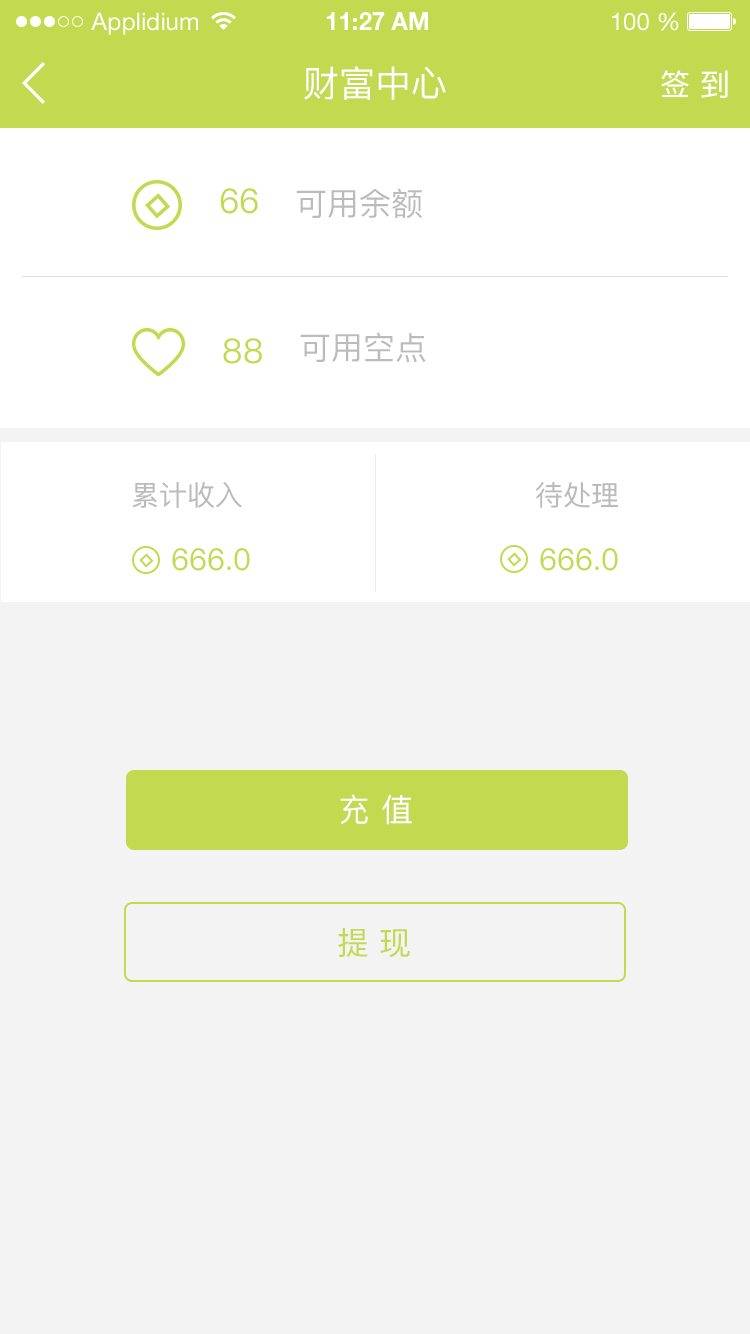
<style>
.page{position:relative;width:750px;height:1334px;background:#f3f3f3}
.page>*{position:absolute;margin:0}
.t1{font:24px "HelveticaNeueLTStd-Roman";color:#ffffff}
.t2{font:24px "HelveticaNeueLTStd-Bd";color:#ffffff}
.t3{font:36px "PingFangSC-Regular";color:#ffffff}
.t4{font:30px "PingFangSC-Regular";color:#ffffff}
.t5{font:34px "PingFangSC-Regular";color:#c3d94f}
.t6{font:32px "PingFangSC-Regular";color:#bbbbbb}
.t7{font:28px "PingFangSC-Regular";color:#bbbbbb}
.t8{font:30px "PingFangSC-Regular";color:#c3d94f}
.t9{font:32px "PingFangSC-Regular";color:#ffffff}
.t10{font:32px "PingFangSC-Regular";color:#c3d94f}
</style>
<div class="page">
<p class="t1" style="left:91px;top:12px;width:107px;height:23px">Applidium</p>
<p class="t2" style="left:326px;top:12px;width:102px;height:18px">11:27 AM</p>
<p class="t1" style="left:612px;top:12px;width:67px;height:19px">100 %</p>
<p class="t3" style="left:304px;top:66px;width:142px;height:34px">财富中心</p>
<p class="t4" style="left:661px;top:70px;width:67px;height:28px">签 到</p>
<p class="t5" style="left:220px;top:188px;width:38px;height:26px">66</p>
<p class="t6" style="left:296px;top:188px;width:126px;height:31px">可用余额</p>
<p class="t5" style="left:223px;top:338px;width:39px;height:26px">88</p>
<p class="t6" style="left:300px;top:332px;width:126px;height:31px">可用空点</p>
<p class="t7" style="left:132px;top:482px;width:110px;height:26px">累计收入</p>
<p class="t7" style="left:536px;top:482px;width:82px;height:26px">待处理</p>
<p class="t8" style="left:172px;top:548px;width:78px;height:23px">666.0</p>
<p class="t8" style="left:540px;top:548px;width:78px;height:23px">666.0</p>
<p class="t9" style="left:340px;top:794px;width:72px;height:31px">充 值</p>
<p class="t10" style="left:338px;top:928px;width:72px;height:30px">提 现</p>
</div>
